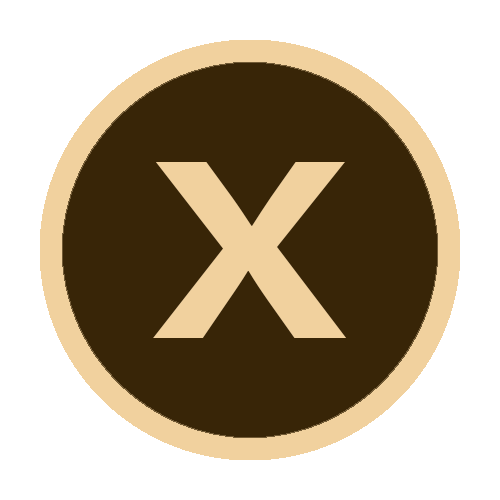
<style>
.page{position:relative;width:500px;height:500px;background:#ffffff}
.page>*{position:absolute;margin:0}
.t1{font:319.3px "AdobeHeitiStd-Regular";letter-spacing:0.2em;color:#f1d19e;scale:1.23 1}
</style>
<div class="page">
<p class="t1" style="left:153px;top:162px;width:193px;height:176px">x</p>
</div>
